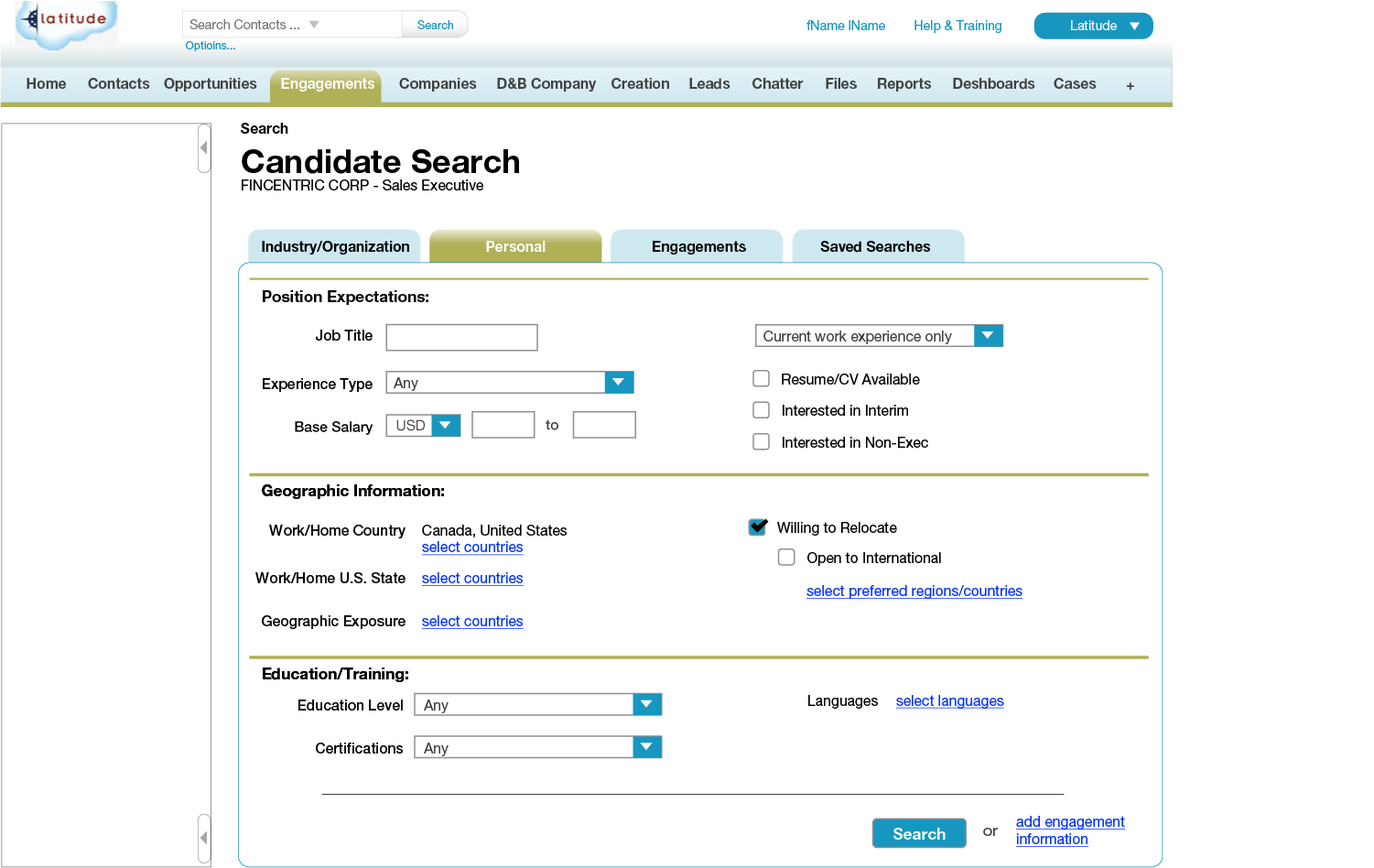
<style>
.page{position:relative;width:1374px;height:868px;background:#ffffff}
.page>*{position:absolute;margin:0}
.t1{font:12.9px "HelveticaNeue-Roman";color:#797979}
.t2{font:11.6px "HelveticaNeue-Roman";color:#1797c0}
.t3{font:12.9px "HelveticaNeue-Roman";color:#1797c0}
.t4{font:12.9px "HelveticaNeue-Roman";color:#f5f5f5}
.t5{font:11px "HelveticaNeue-Roman";color:#1797c0}
.t6{font:14.3px "HelveticaNeue-Bold";color:#424242}
.t7{font:14.3px "HelveticaNeue-Bold";color:#ffffff}
.t8{font:14.3px "HelveticaNeue-Roman";color:#000000}
.t9{font:14.3px "HelveticaNeue-Bold";color:#000000}
.t10{font:33px "HelveticaNeue-Bold";color:#000000}
.t11{font:15.8px "HelveticaNeue-Bold";color:#000000}
.t12{font:14.3px "HelveticaNeue-Medium";color:#000000}
.t13{font:14.3px "HelveticaNeue-Roman";color:#424242}
.t14{font:14.3px "HelveticaNeue-Roman";color:#0433ff;text-decoration:underline}
.t15{font:15.8px "HelveticaNeue-Bold";color:#ffffff}
.t16{font:15.8px "HelveticaNeue-Roman";color:#424242}
</style>
<div class="page">
<p class="t1" style="left:189px;top:19px;width:110px;height:10px">Search Contacts ...</p>
<p class="t2" style="left:417px;top:20px;width:36px;height:9px">Search</p>
<p class="t3" style="left:806px;top:20px;width:195px;height:13px">fName lName        Help &amp; Training</p>
<p class="t4" style="left:1071px;top:20px;width:46px;height:10px">Latitude</p>
<p class="t5" style="left:186px;top:41px;width:49px;height:10px">Optioins...</p>
<p class="t6" style="left:27px;top:78px;width:39px;height:11px">Home</p>
<p class="t6" style="left:88px;top:78px;width:62px;height:11px">Contacts</p>
<p class="t6" style="left:164px;top:78px;width:93px;height:14px">Opportunities</p>
<p class="t7" style="left:281px;top:78px;width:93px;height:14px">Engagements</p>
<p class="t6" style="left:399px;top:78px;width:78px;height:14px">Companies</p>
<p class="t6" style="left:497px;top:78px;width:100px;height:14px">D&amp;B Company</p>
<p class="t6" style="left:612px;top:78px;width:57px;height:11px">Creation</p>
<p class="t6" style="left:689px;top:78px;width:42px;height:12px">Leads</p>
<p class="t6" style="left:752px;top:78px;width:52px;height:11px">Chatter</p>
<p class="t6" style="left:826px;top:78px;width:31px;height:11px">Files</p>
<p class="t6" style="left:878px;top:78px;width:53px;height:14px">Reports</p>
<p class="t6" style="left:953px;top:78px;width:82px;height:12px">Deshboards</p>
<p class="t6" style="left:1054px;top:78px;width:43px;height:11px">Cases</p>
<p class="t6" style="left:1127px;top:82px;width:7px;height:8px">+</p>
<p class="t8" style="left:241px;top:123px;width:278px;height:67px"><span class="t9">Search<br></span><span class="t10">Candidate Search<br></span>FINCENTRIC CORP - Sales Executive</p>
<p class="t9" style="left:262px;top:241px;width:147px;height:13px">Industry/Organization</p>
<p class="t7" style="left:486px;top:241px;width:60px;height:11px">Personal</p>
<p class="t9" style="left:653px;top:241px;width:93px;height:13px">Engagements</p>
<p class="t9" style="left:820px;top:241px;width:110px;height:12px">Saved Searches</p>
<p class="t11" style="left:263px;top:290px;width:165px;height:15px">Position Expectations:</p>
<p class="t12" style="left:316px;top:330px;width:57px;height:11px">Job Title</p>
<p class="t13" style="left:763px;top:330px;width:189px;height:14px">Current work experience only</p>
<p class="t13" style="left:394px;top:377px;width:24px;height:14px">Any</p>
<p class="t8" style="left:782px;top:373px;width:138px;height:11px">Resume/CV Available</p>
<p class="t12" style="left:263px;top:378px;width:110px;height:14px">Experience Type</p>
<p class="t8" style="left:783px;top:405px;width:125px;height:11px">Interested in Interim</p>
<p class="t8" style="left:783px;top:437px;width:145px;height:11px">Interested in Non-Exec</p>
<p class="t11" style="left:262px;top:484px;width:182px;height:15px">Geographic Information:</p>
<p class="t11" style="left:262px;top:484px;width:182px;height:15px">Geographic Information:</p>
<p class="t8" style="left:777px;top:522px;width:120px;height:14px">Willing to Relocate</p>
<p class="t12" style="left:269px;top:525px;width:137px;height:13px">Work/Home Country</p>
<p class="t8" style="left:422px;top:525px;width:145px;height:31px">Canada, United States<br><span class="t14">select countries</span></p>
<p class="t8" style="left:807px;top:552px;width:134px;height:14px">Open to International</p>
<p class="t12" style="left:255px;top:572px;width:151px;height:11px">Work/Home U.S. State</p>
<p class="t14" style="left:422px;top:572px;width:102px;height:14px">select countries</p>
<p class="t14" style="left:806px;top:585px;width:217px;height:14px">select preferred regions/countries</p>
<p class="t12" style="left:262px;top:615px;width:144px;height:14px">Geographic Exposure</p>
<p class="t14" style="left:422px;top:615px;width:102px;height:14px">select countries</p>
<p class="t11" style="left:263px;top:667px;width:145px;height:15px">Education/Training:</p>
<p class="t11" style="left:263px;top:667px;width:145px;height:15px">Education/Training:</p>
<p class="t12" style="left:298px;top:699px;width:105px;height:11px">Education Level</p>
<p class="t13" style="left:424px;top:699px;width:25px;height:14px">Any</p>
<p class="t8" style="left:808px;top:695px;width:70px;height:14px">Languages</p>
<p class="t14" style="left:895px;top:695px;width:109px;height:14px">select languages</p>
<p class="t12" style="left:316px;top:742px;width:87px;height:11px">Certifications</p>
<p class="t13" style="left:424px;top:742px;width:25px;height:14px">Any</p>
<p class="t14" style="left:1016px;top:816px;width:109px;height:13px">add engagement</p>
<p class="t15" style="left:893px;top:828px;width:53px;height:11px">Search</p>
<p class="t16" style="left:983px;top:828px;width:15px;height:8px">or</p>
<p class="t14" style="left:1016px;top:833px;width:73px;height:14px">information</p>
</div>
